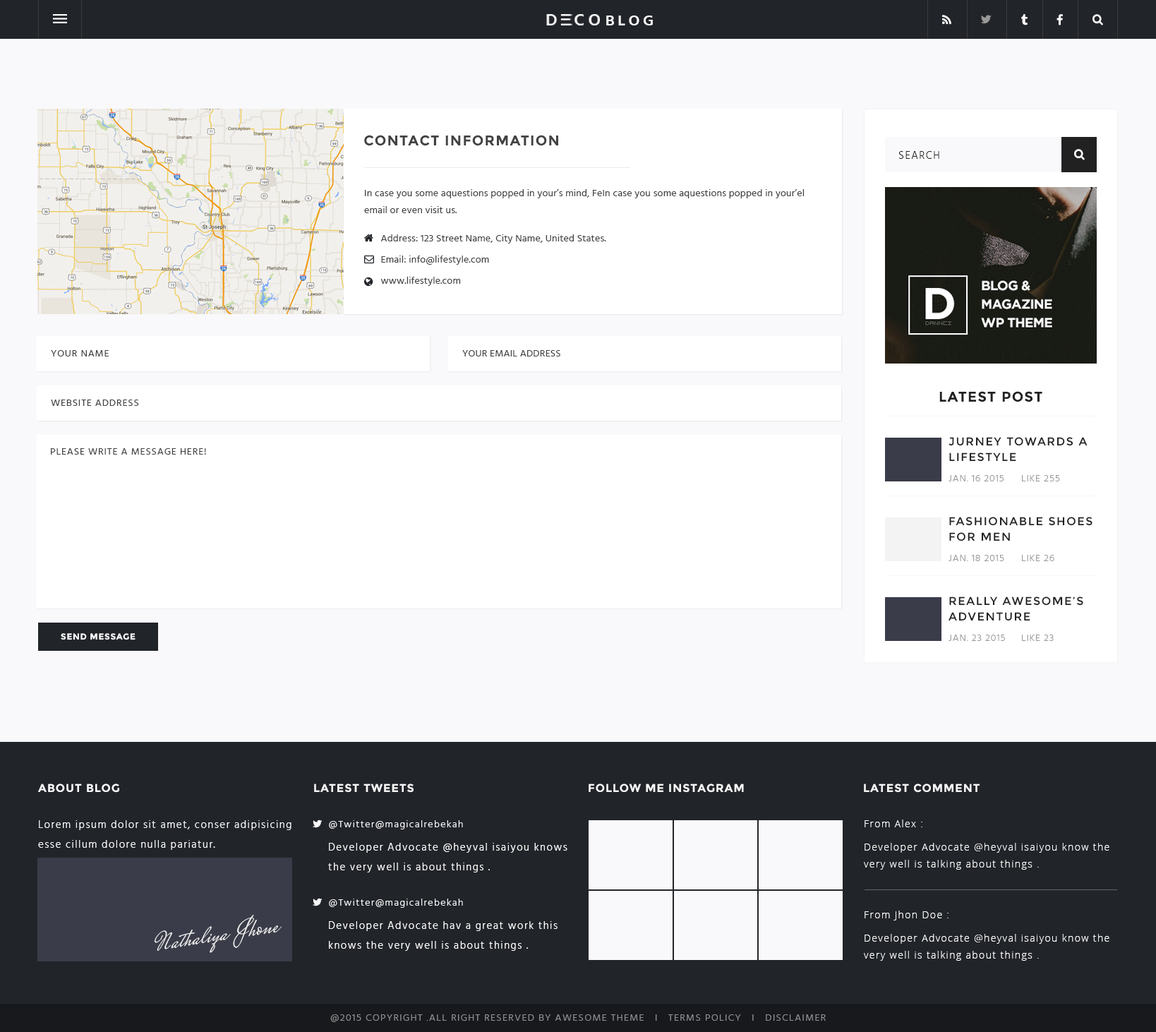
<style>
.page{position:relative;width:1156px;height:1032px;background:#ffffff}
.page>*{position:absolute;margin:0}
.t1{font:15.6px "Hind-Semibold";letter-spacing:0.2em;color:#fefefe;text-transform:uppercase}
.t2{font:14.1px "Montserrat-Bold";letter-spacing:0.06em;color:#424242;text-transform:uppercase}
.t3{font:10.6px "Hind-Light";letter-spacing:0.1em;color:#212121;text-transform:uppercase}
.t4{font:9.9px/16.9px "Hind-Regular";letter-spacing:0.012em;color:#424242}
.t5{font:9.9px "Hind-Regular";letter-spacing:0.012em;color:#424242}
.t6{font:9.9px "Hind-Regular";letter-spacing:0.06em;color:#424242;text-transform:uppercase}
.t7{font:9.9px "Hind-Regular";letter-spacing:0.012em;color:#424242;text-transform:uppercase}
.t8{font:14.1px "Montserrat-Bold";letter-spacing:0.06em;color:#212121;text-transform:uppercase}
.t9{font:11.3px/15.5px "Montserrat-Regular";letter-spacing:0.1em;color:#212121;text-transform:uppercase}
.t10{font:9.9px "Hind-Light";letter-spacing:0.06em;color:#999999;text-transform:uppercase}
.t11{font:8.5px "Montserrat-Bold";letter-spacing:0.06em;color:#ffffff;text-transform:uppercase}
.t12{font:11.3px "Montserrat-Bold";letter-spacing:0.06em;color:#f9f9fb;text-transform:uppercase}
.t13{font:11.3px "Montserrat-Bold";letter-spacing:0.06em;color:#f7f7f7;text-transform:uppercase}
.t14{font:10.6px/19.8px "Hind-Light";letter-spacing:0.1em;color:#f9f9fb}
.t15{font:9.9px "OpenSans-Light";letter-spacing:0.1em;color:#ffffff}
.t16{font:10.6px/19.8px "Hind-Light";letter-spacing:0.1em;color:#ffffff}
.t17{font:9.9px/16.9px "OpenSans-Light";letter-spacing:0.1em;color:#ffffff}
.t18{font:25.4px "MrsSaintDelafield-Regular";letter-spacing:0.012em;color:#f3f3f3}
.t19{font:9.9px "Hind-Light";letter-spacing:0.1em;color:#929293;text-transform:uppercase}
</style>
<div class="page">
<p class="t1" style="left:606px;top:16px;width:47px;height:9px">Blog</p>
<p class="t2" style="left:364px;top:135px;width:194px;height:11px">Contact information</p>
<p class="t3" style="left:899px;top:151px;width:40px;height:8px">Search</p>
<p class="t4" style="left:364px;top:189px;width:440px;height:24px">In case you some aquestions popped in your’s mind, FeIn case you some aquestions popped in your’el email or even visit us.</p>
<p class="t5" style="left:380px;top:234px;width:226px;height:9px">Address: 123 Street Name, City Name, United States.</p>
<p class="t5" style="left:381px;top:255px;width:108px;height:10px">Email: info@lifestyle.com</p>
<p class="t5" style="left:380px;top:277px;width:81px;height:9px">www.lifestyle.com</p>
<p class="t6" style="left:51px;top:350px;width:58px;height:6px">Your Name</p>
<p class="t7" style="left:462px;top:350px;width:98px;height:6px">Your Email Address</p>
<p class="t6" style="left:51px;top:399px;width:88px;height:7px">Website Address</p>
<p class="t8" style="left:939px;top:391px;width:103px;height:11px">Latest Post</p>
<p class="t9" style="left:948px;top:437px;width:139px;height:24px">jurney towards a<br>lifestyle</p>
<p class="t6" style="left:51px;top:448px;width:155px;height:6px">Please write a message here!</p>
<p class="t10" style="left:948px;top:475px;width:56px;height:6px">Jan. 16 2015</p>
<p class="t10" style="left:1022px;top:475px;width:38px;height:6px">Like 255</p>
<p class="t9" style="left:949px;top:517px;width:143px;height:24px">Fashionable shoes<br>for men</p>
<p class="t10" style="left:948px;top:555px;width:56px;height:6px">Jan. 18 2015</p>
<p class="t10" style="left:1022px;top:555px;width:32px;height:6px">Like 26</p>
<p class="t9" style="left:948px;top:596px;width:135px;height:25px">really awesome’s <br>Adventure</p>
<p class="t11" style="left:61px;top:633px;width:74px;height:7px">send message</p>
<p class="t10" style="left:948px;top:634px;width:57px;height:7px">Jan. 23 2015</p>
<p class="t10" style="left:1022px;top:634px;width:32px;height:7px">Like 23</p>
<p class="t12" style="left:38px;top:783px;width:81px;height:9px">About Blog</p>
<p class="t13" style="left:314px;top:783px;width:100px;height:9px">latest tweets</p>
<p class="t13" style="left:589px;top:783px;width:155px;height:9px">Follow me instagram</p>
<p class="t13" style="left:864px;top:783px;width:115px;height:9px">latest comment</p>
<p class="t14" style="left:38px;top:820px;width:253px;height:30px">Lorem ipsum dolor sit amet, conser adipisicing  esse cillum dolore nulla pariatur.</p>
<p class="t15" style="left:864px;top:819px;width:58px;height:8px">From Alex :</p>
<p class="t16" style="left:328px;top:843px;width:239px;height:29px">Developer Advocate @heyval isaiyou knows the very well is about things .</p>
<p class="t17" style="left:864px;top:843px;width:245px;height:26px">Developer Advocate @heyval isaiyou know the very well is talking about things .</p>
<p class="t18" style="left:154px;top:915px;width:128px;height:38px;rotate:-9deg">Nathaliya Jhone</p>
<p class="t15" style="left:864px;top:910px;width:84px;height:10px">From Jhon Doe :</p>
<p class="t16" style="left:329px;top:921px;width:228px;height:30px">Developer Advocate hav a great work this knows the very well is about things .</p>
<p class="t17" style="left:864px;top:934px;width:245px;height:26px">Developer Advocate @heyval isaiyou know the very well is talking about things .</p>
<p class="t19" style="left:330px;top:1014px;width:496px;height:8px">@2015 copyright .all right reserved by awesome theme   i   terms policy   i   disclaimer</p>
</div>
